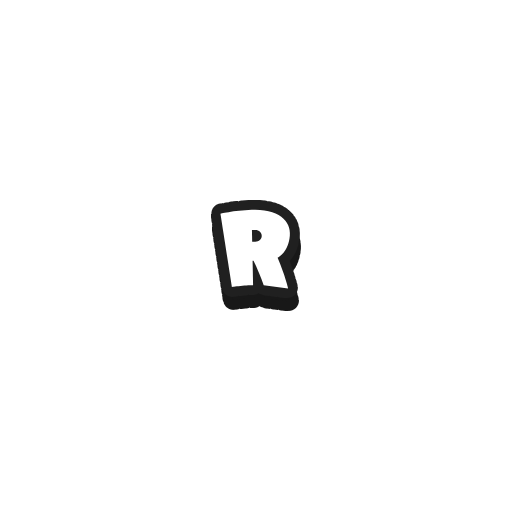
<style>
.page{position:relative;width:512px;height:512px;background:#ffffff}
.page>*{position:absolute;margin:0}
.t1{font:106.1px "PeaceSans";color:#ffffff;text-transform:uppercase;scale:0.77 1}
</style>
<div class="page">
<p class="t1" style="left:220px;top:209px;width:70px;height:80px">R</p>
<p class="t1" style="left:221px;top:222px;width:71px;height:80px">R</p>
</div>
